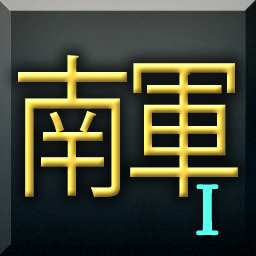
<style>
.page{position:relative;width:256px;height:256px}
.page>*{position:absolute;margin:0}
.t1{font:152px "KozGoPr6N-Regular";letter-spacing:-0.075em;scale:0.79 1}
.t2{font:72px "FanwoodText";letter-spacing:-0.075em;color:#5affee;font-weight:bold}
</style>
<div class="page">
<p class="t1" style="left:18px;top:55px;width:220px;height:142px">南軍</p>
<p class="t1" style="left:18px;top:55px;width:220px;height:142px">南軍</p>
<p class="t2" style="left:196px;top:184px;width:23px;height:52px">I</p>
</div>
